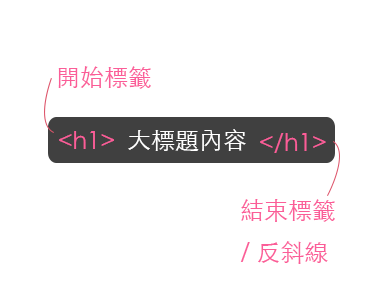
<style>
.page{position:relative;width:388px;height:300px;background:#ffffff}
.page>*{position:absolute;margin:0}
.t1{font:24px "STHeitiTC-Light";color:#fb5d98}
.t2{font:24px "STHeitiTC-Light";color:#ffffff}
</style>
<div class="page">
<p class="t1" style="left:58px;top:66px;width:93px;height:23px">開始標籤</p>
<p class="t1" style="left:59px;top:131px;width:55px;height:18px">&lt;h1&gt;</p>
<p class="t2" style="left:128px;top:129px;width:118px;height:22px">大標題內容</p>
<p class="t1" style="left:260px;top:133px;width:66px;height:20px">&lt;/h1&gt;</p>
<p class="t1" style="left:240px;top:199px;width:95px;height:65px">結束標籤<br>/反斜線</p>
</div>
